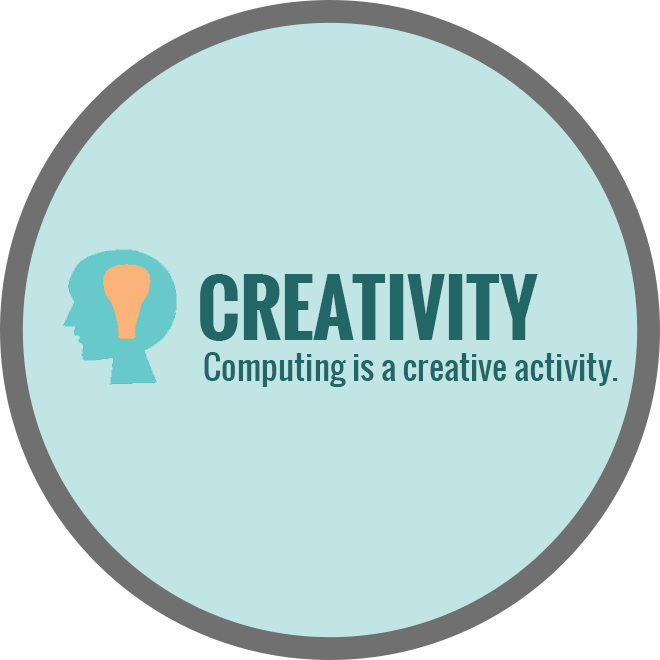
<style>
.page{position:relative;width:660px;height:660px;background:#c0e5e4}
.page>*{position:absolute;margin:0}
.t1{font:75px "Oswald-Bold";color:#236666}
.t2{font:33.3px "Oswald-Regular";color:#236666}
</style>
<div class="page">
<p class="t1" style="left:200px;top:274px;width:338px;height:67px">CREATIVITY</p>
<p class="t2" style="left:204px;top:352px;width:414px;height:35px">Computing is a creative activity.</p>
</div>
